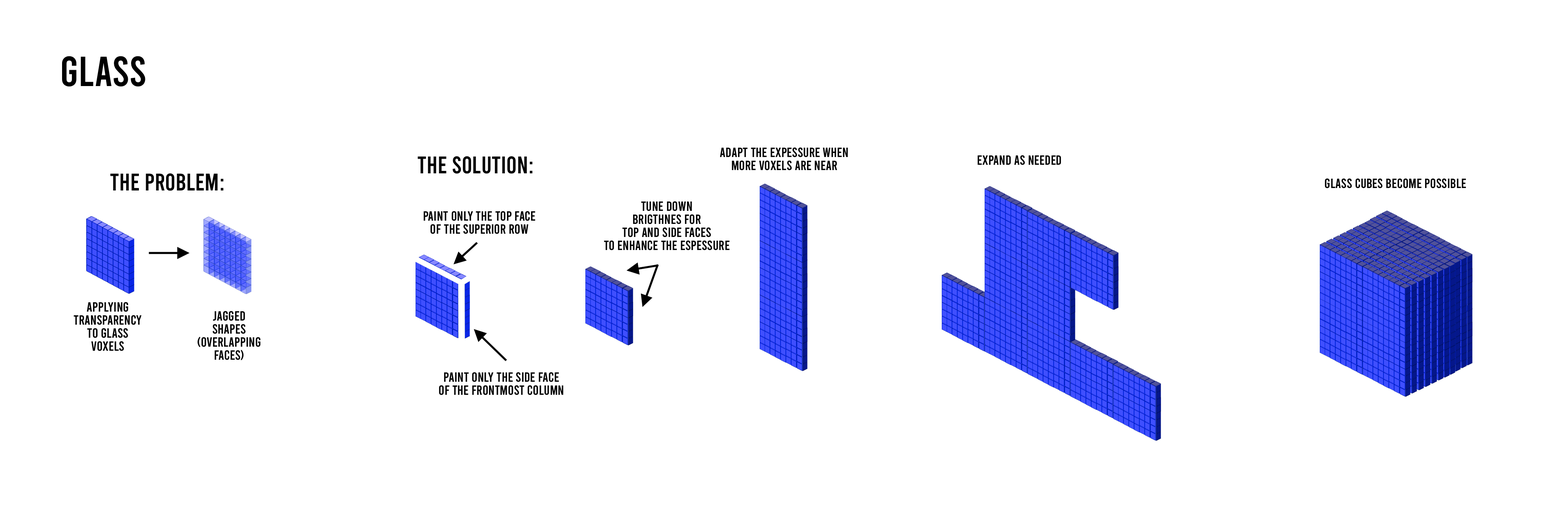
<style>
.page{position:relative;width:1568px;height:518px;background:#ffffff}
.page>*{position:absolute;margin:0}
.t1{font:42px "Bebas-Regular";color:#000000}
.t2{font:13.5px/13.1px "Bebas-Regular";color:#000000}
.t3{font:24.1px "Bebas-Regular";color:#000000}
.t4{font:13.5px "Bebas-Regular";color:#000000}
</style>
<div class="page">
<p class="t1" style="left:62px;top:56px;width:83px;height:31px">GLASS</p>
<p class="t2" style="left:720px;top:147px;width:128px;height:24px;text-align:center">ADAPT THE EXPESSURE WHEN<br>MORE VOXELS ARE NEAR</p>
<p class="t3" style="left:418px;top:156px;width:115px;height:18px">THE SOLUTION:</p>
<p class="t4" style="left:977px;top:155px;width:84px;height:10px">EXPAND AS NEEDED</p>
<p class="t3" style="left:110px;top:173px;width:114px;height:18px">THE PROBLEM:</p>
<p class="t4" style="left:1325px;top:178px;width:141px;height:11px">GLASS CUBES BECOME POSSIBLE</p>
<p class="t2" style="left:604px;top:201px;width:126px;height:50px;text-align:center">Tune DOWN<br>BRIGTHNES FOR<br>TOP and SIDE FACES<br>TO enhance THE espessure</p>
<p class="t2" style="left:423px;top:211px;width:112px;height:23px;text-align:center">PAINT ONLY THE TOP FACE<br>OF THE SUPERIOR ROW</p>
<p class="t2" style="left:73px;top:302px;width:69px;height:49px;text-align:center">APPLYING<br>TRANSPARENCY<br>TO GLASS<br>VOXELS</p>
<p class="t2" style="left:197px;top:311px;width:63px;height:50px;text-align:center">JAGGED<br>SHAPES<br>(OVERLAPPING<br>FACES)</p>
<p class="t2" style="left:439px;top:372px;width:124px;height:24px;text-align:center">PAINT ONLY THE SIDE FACE<br>OF THE FRONTMOST COLUMN</p>
</div>
